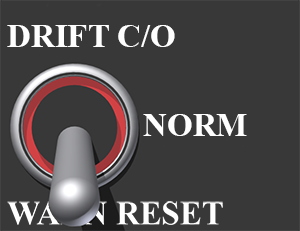
<style>
.page{position:relative;width:300px;height:231px;background:#383838}
.page>*{position:absolute;margin:0}
.t1{font:32.8px "TimesNewRomanPS-BoldMT";color:#fefefe}
</style>
<div class="page">
<p class="t1" style="left:7px;top:25px;width:168px;height:22px">DRIFT C/O</p>
<p class="t1" style="left:143px;top:114px;width:104px;height:22px">NORM</p>
</div>
